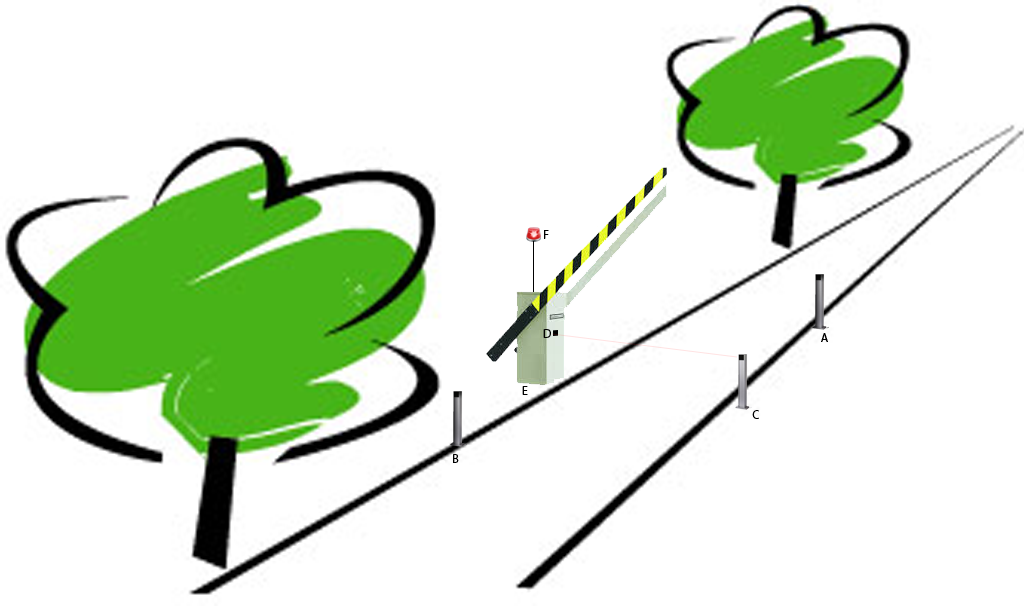
<style>
.page{position:relative;width:1024px;height:606px;background:#ffffff}
.page>*{position:absolute;margin:0}
.t1{font:12px "MyriadPro-Regular";color:#000000}
</style>
<div class="page">
<p class="t1" style="left:544px;top:230px;width:5px;height:9px">F</p>
<p class="t1" style="left:543px;top:329px;width:8px;height:9px">D</p>
<p class="t1" style="left:821px;top:333px;width:7px;height:9px">A</p>
<p class="t1" style="left:522px;top:386px;width:6px;height:9px">E</p>
<p class="t1" style="left:752px;top:410px;width:7px;height:9px">C</p>
<p class="t1" style="left:453px;top:454px;width:6px;height:9px">B</p>
</div>
